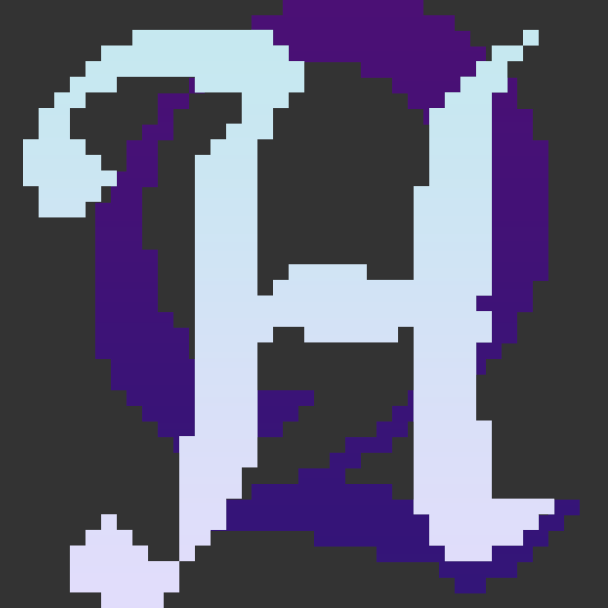
<style>
.page{position:relative;width:608px;height:608px;background:#333333}
.page>*{position:absolute;margin:0}
.t1{font:1000px "RuneScape-Quill-Caps";letter-spacing:0.01em;color:#d2e3f5}
</style>
<div class="page">
<p class="t1" style="left:23px;top:29px;width:532px;height:579px">H</p>
</div>
